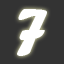
<style>
.page{position:relative;width:64px;height:64px;background:#333333}
.page>*{position:absolute;margin:0}
.t1{font:72px "ForteMT";color:#ffffff}
</style>
<div class="page">
<p class="t1" style="left:17px;top:9px;width:30px;height:47px">7</p>
</div>
